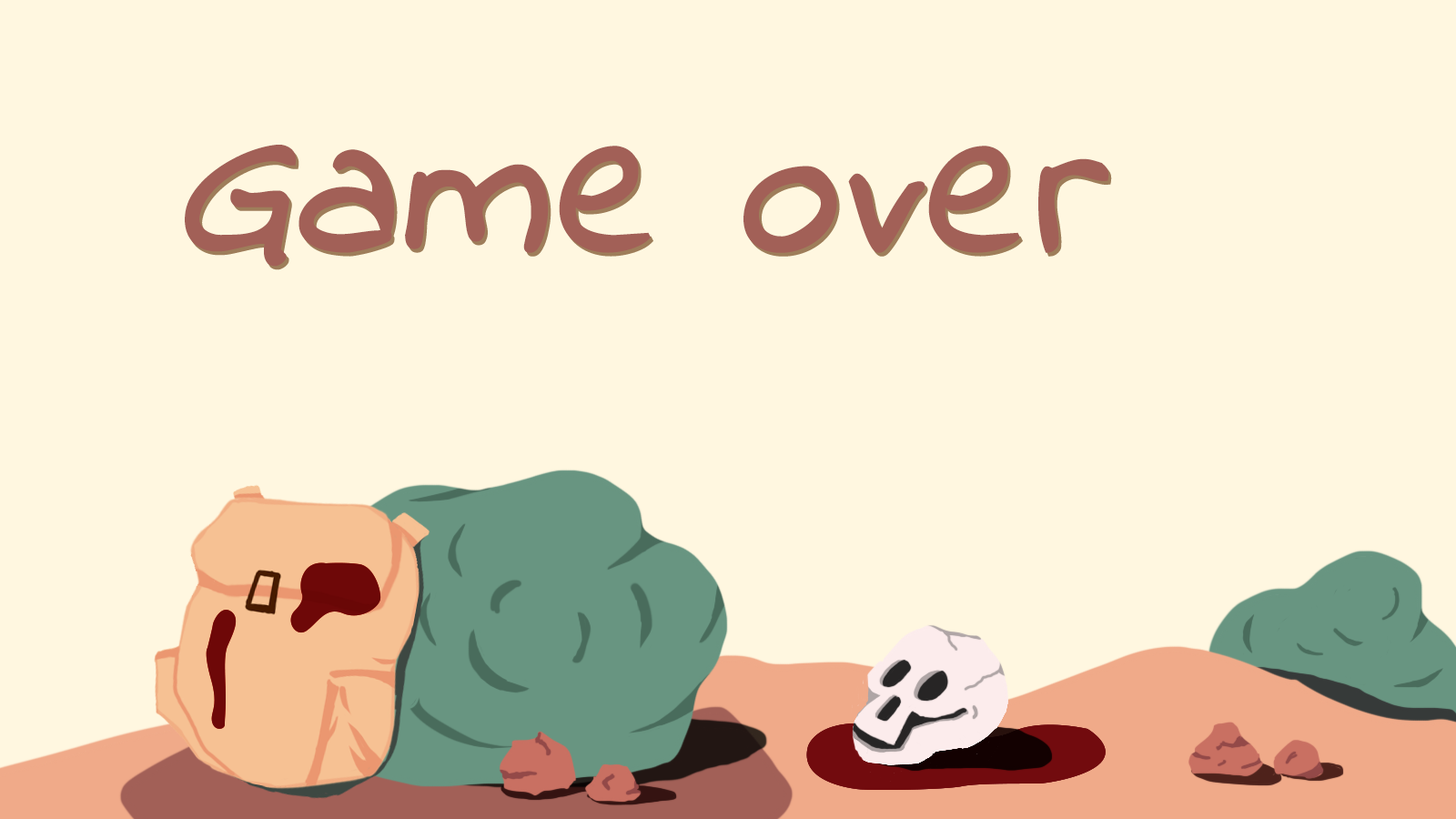
<style>
.page{position:relative;width:1456px;height:819px;background:#fff7e0}
.page>*{position:absolute;margin:0}
.t1{font:195.7px "IndieFlower";letter-spacing:0.001em;color:#a26057;font-weight:bold;font-style:italic}
</style>
<div class="page">
<p class="t1" style="left:185px;top:145px;width:924px;height:122px">Game over</p>
</div>
